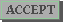
<style>
.page{position:relative;width:63px;height:22px;background:#acacac}
.page>*{position:absolute;margin:0}
.t1{font:14px "NuevaStd-Bold";color:#4b4b4b}
</style>
<div class="page">
<p class="t1" style="left:6px;top:5px;width:9px;height:9px">A</p>
<p class="t1" style="left:15px;top:5px;width:15px;height:9px">CC</p>
<p class="t1" style="left:31px;top:5px;width:7px;height:9px">E</p>
<p class="t1" style="left:39px;top:5px;width:16px;height:9px">PT</p>
</div>
